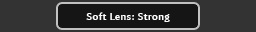
<style>
.page{position:relative;width:256px;height:32px;background:#333333}
.page>*{position:absolute;margin:0}
.t1{font:10px "AmiraParadiso";letter-spacing:0.05em;color:#ffffff}
</style>
<div class="page">
<p class="t1" style="left:86px;top:12px;width:84px;height:10px">Soft Lens: Strong</p>
</div>
